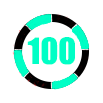
<style>
.page{position:relative;width:103px;height:103px;background:#ffffff}
.page>*{position:absolute;margin:0}
.t1{font:33.3px "Impact";color:#00ffc6}
</style>
<div class="page">
<p class="t1" style="left:27px;top:37px;width:48px;height:28px">100</p>
</div>
